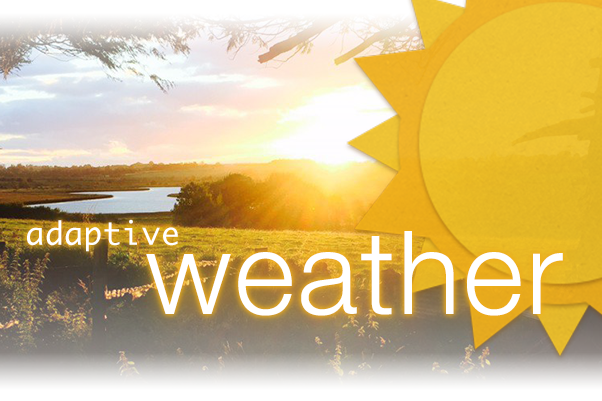
<style>
.page{position:relative;width:602px;height:401px}
.page>*{position:absolute;margin:0}
.t1{font:31px "Ayuthaya";letter-spacing:0.025em;color:#ffffff}
.t2{font:116px "HelveticaNeue-Light";letter-spacing:0.025em;color:#ffffff}
</style>
<div class="page">
<p class="t1" style="left:27px;top:219px;width:151px;height:33px">adaptive</p>
<p class="t2" style="left:146px;top:231px;width:417px;height:85px">weather</p>
</div>
